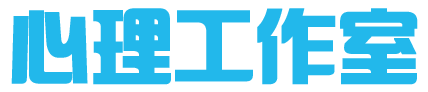
<style>
.page{position:relative;width:428px;height:92px;background:#ffffff}
.page>*{position:absolute;margin:0}
.t1{font:80px "FZHZGBJW--GB1-0";color:#22b8eb;font-weight:bold}
</style>
<div class="page">
<p class="t1" style="left:11px;top:8px;width:407px;height:77px">心理工作室</p>
</div>
